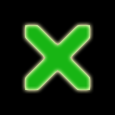
<style>
.page{position:relative;width:115px;height:115px;background:#000000}
.page>*{position:absolute;margin:0}
.t1{font:96px "AstronomicMono";color:#18b514}
</style>
<div class="page">
<p class="t1" style="left:25px;top:25px;width:65px;height:65px">X</p>
</div>
